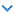
<style>
.page{position:relative;width:14px;height:14px;background:#ffffff}
.page>*{position:absolute;margin:0}
.t1{font:18px "Fixedsys";color:#0066cc}
</style>
<div class="page">
<p class="t1" style="left:2px;top:5px;width:11px;height:7px;rotate:90deg">&gt;</p>
</div>
